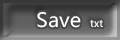
<style>
.page{position:relative;width:120px;height:40px}
.page>*{position:absolute;margin:0}
.t1{font:19.6px "MicrosoftYaHei";color:#ffffff}
.t2{font:10px "MicrosoftYaHei";color:#ffffff}
</style>
<div class="page">
<p class="t1" style="left:37px;top:11px;width:66px;height:17px">Save <span class="t2"> txt</span></p>
</div>
